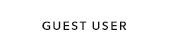
<style>
.page{position:relative;width:170px;height:50px;background:#ffffff}
.page>*{position:absolute;margin:0}
.t1{font:12px "AvenirNext-DemiBold";letter-spacing:0.12em;color:#101010}
</style>
<div class="page">
<p class="t1" style="left:42px;top:21px;width:85px;height:9px">GUEST USER</p>
</div>
